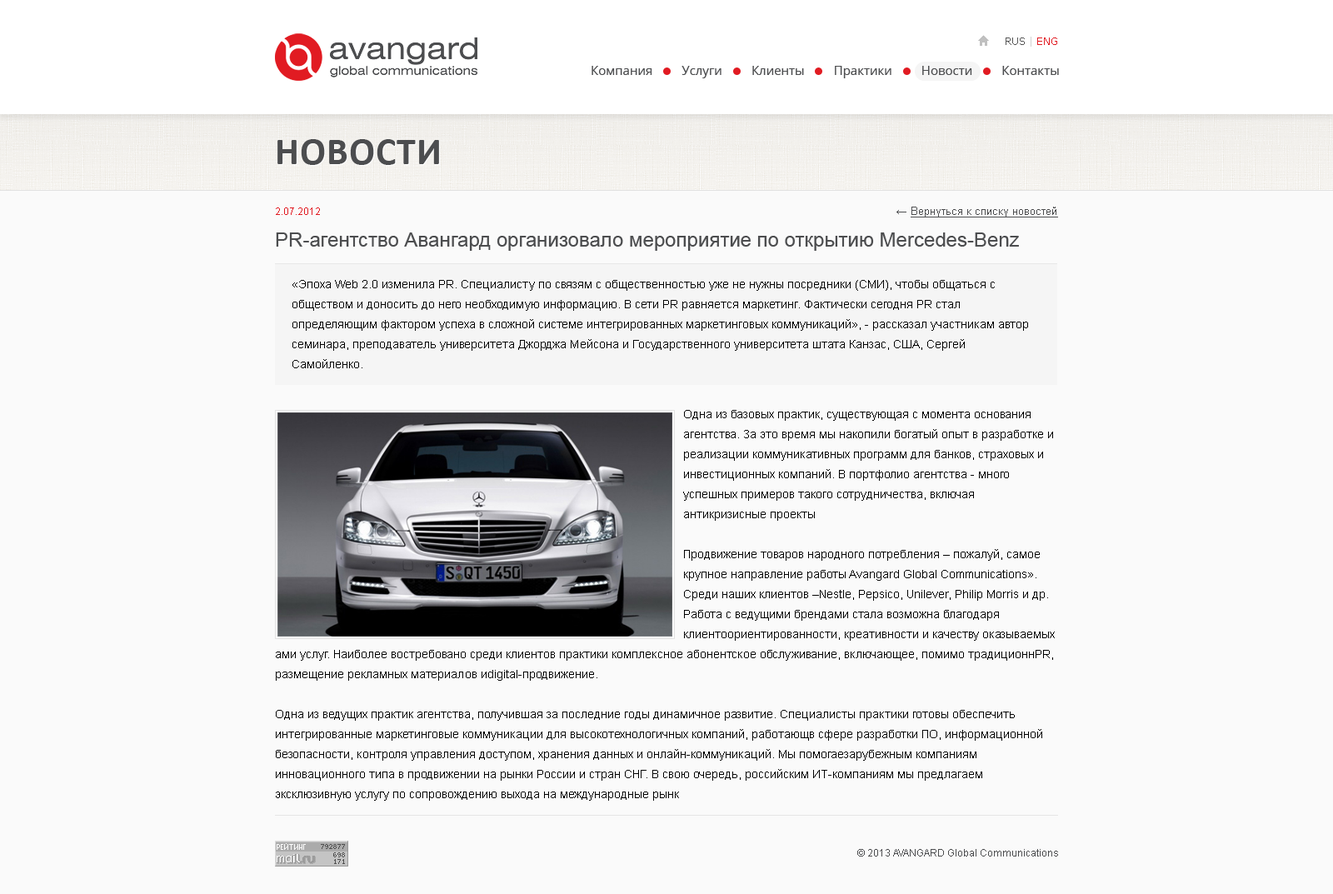
<style>
.page{position:relative;width:1333px;height:894px;background:#fafafa}
.page>*{position:absolute;margin:0}
.t1{font:10px "Verdana";color:#555555}
.t2{font:10px "Verdana";color:#d1d1d1}
.t3{font:10px "Verdana";color:#e11b22}
.t4{font:12.5px "OpenSans";color:#4c4d4f}
.t5{font:38.3px "Calibri-Bold";letter-spacing:0.02em;color:#4c4d4f;text-transform:uppercase}
.t6{font:10px "ArialMT";color:#e11b22}
.t7{font:15px "ArialMT";color:#4c4d4f}
.t8{font:10.8px "ArialMT";color:#4c4d4f;text-decoration:underline}
.t9{font:11.7px "ArialMT";color:#4c4d4f}
.t10{font:20px "ArialMT";color:#4c4d4f}
.t11{font:11.7px/20px "ArialMT";color:#000000}
.t12{font:10px "ArialMT";color:#4c4d4f}
</style>
<div class="page">
<p class="t1" style="left:1006px;top:37px;width:52px;height:10px">RUS<span class="t2"> | </span><span class="t3">ENG</span></p>
<p class="t4" style="left:592px;top:66px;width:467px;height:12px">Компания         Услуги         Клиенты         Практики         Новости         Контакты</p>
<p class="t5" style="left:278px;top:139px;width:161px;height:26px">Новости</p>
<p class="t6" style="left:276px;top:208px;width:44px;height:7px"><span class="t7"><br></span>2.07.2012</p>
<p class="t8" style="left:897px;top:207px;width:161px;height:11px"><span class="t9">← </span>Вернуться к списку новостей</p>
<p class="t10" style="left:276px;top:233px;width:743px;height:18px">PR-агентство Авангард организовало мероприятие по открытию Mercedes-Benz</p>
<p class="t11" style="left:293px;top:280px;width:735px;height:88px">«Эпоха Web 2.0 изменила PR. Специалисту по связям с общественностью уже не нужны посредники (СМИ), чтобы общаться с обществом и доносить до него необходимую информацию. В сети PR равняется маркетинг. Фактически сегодня PR стал определяющим фактором успеха в сложной системе интегрированных маркетинговых коммуникаций», - рассказал участникам автор семинара, преподаватель университета Джорджа Мейсона и Государственного университета штата Канзас, США, Сергей Самойленко.</p>
<p class="t11" style="left:276px;top:410px;width:779px;height:391px">Одна из базовых практик, существующая с момента основания агентства. За это время мы накопили богатый опыт в разработке и реализации коммуникативных программ для банков, страховых и инвестиционных компаний. В портфолио агентства - много успешных примеров такого сотрудничества, включая антикризисные проекты<br><br>Продвижение товаров народного потребления – пожалуй, самое крупное направление работы Avangard Global Communications». Среди наших клиентов –Nestle, Pepsico, Unilever, Philip Morris и др. Работа с ведущими брендами стала возможна благодаря клиентоориентированности, креативности и качеству оказываемых <br>ами услуг. Наиболее востребовано среди клиентов практики комплексное абонентское обслуживание, включающее, помимо традиционнPR, размещение рекламных материалов иdigital-продвижение.<br><br>Одна из ведущих практик агентства, получившая за последние годы динамичное развитие. Специалисты практики готовы обеспечить интегрированные маркетинговые коммуникации для высокотехнологичных компаний, работающв сфере разработки ПО, информационной безопасности, контроля управления доступом, хранения данных и онлайн-коммуникаций. Мы помогаезарубежным компаниям инновационного типа в продвижении на рынки России и стран СНГ. В свою очередь, российским ИТ-компаниям мы предлагаем эксклюзивную услугу по сопровождению выхода на международные рынк</p>
<p class="t12" style="left:858px;top:849px;width:200px;height:8px">© 2013 AVANGARD Global Communications</p>
</div>
